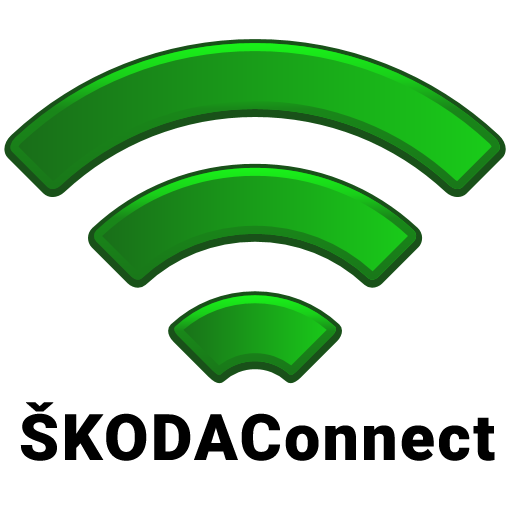
<style>
.page{position:relative;width:512px;height:512px;background:#ffffff}
.page>*{position:absolute;margin:0}
.t1{font:64px "Roboto-Black";letter-spacing:0.04em;color:#000000}
</style>
<div class="page">
<p class="t1" style="left:20px;top:402px;width:475px;height:59px">ŠKODAConnect</p>
</div>
